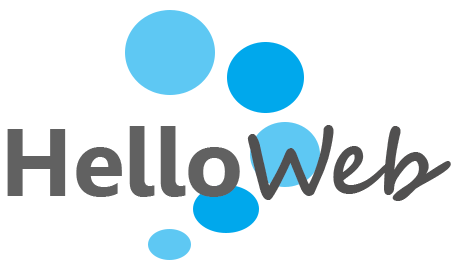
<style>
.page{position:relative;width:454px;height:272px;background:#ffffff}
.page>*{position:absolute;margin:0}
.t1{font:95px "Leelawadee-Bold";color:#616161}
.t2{font:90px "SegoeScript-Bold";color:#515050}
</style>
<div class="page">
<p class="t1" style="left:7px;top:125px;width:444px;height:76px">Hello<span class="t2">Web</span></p>
</div>
